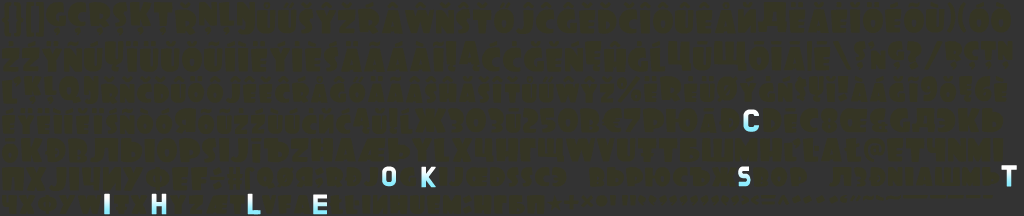
<style>
.page{position:relative;width:1024px;height:216px;background:#333333}
.page>*{position:absolute;margin:0}
.t1{font:25px "BMDoHyeon-OTF";font-weight:bold}
.t2{font:22px "BMDoHyeon-OTF";font-weight:bold}
.t3{font:23px "BMDoHyeon-OTF";font-weight:bold}
.t4{font:22px "BMDoHyeon-OTF";font-weight:bold;scale:0.8 1}
.t5{font:24px "BMDoHyeon-OTF";font-weight:bold}
.t6{font:23px "BMDoHyeon-OTF";font-weight:bold;scale:1.21 1}
</style>
<div class="page">
<p class="t1" style="left:743px;top:109px;width:16px;height:23px">C</p>
<p class="t2" style="left:382px;top:166px;width:14px;height:21px">O</p>
<p class="t3" style="left:421px;top:166px;width:15px;height:22px">K</p>
<p class="t4" style="left:738px;top:166px;width:13px;height:21px">S</p>
<p class="t5" style="left:1001px;top:165px;width:16px;height:22px">T</p>
<p class="t6" style="left:104px;top:193px;width:6px;height:22px">I</p>
<p class="t3" style="left:151px;top:193px;width:16px;height:22px">H</p>
<p class="t2" style="left:313px;top:194px;width:14px;height:21px">E</p>
</div>
